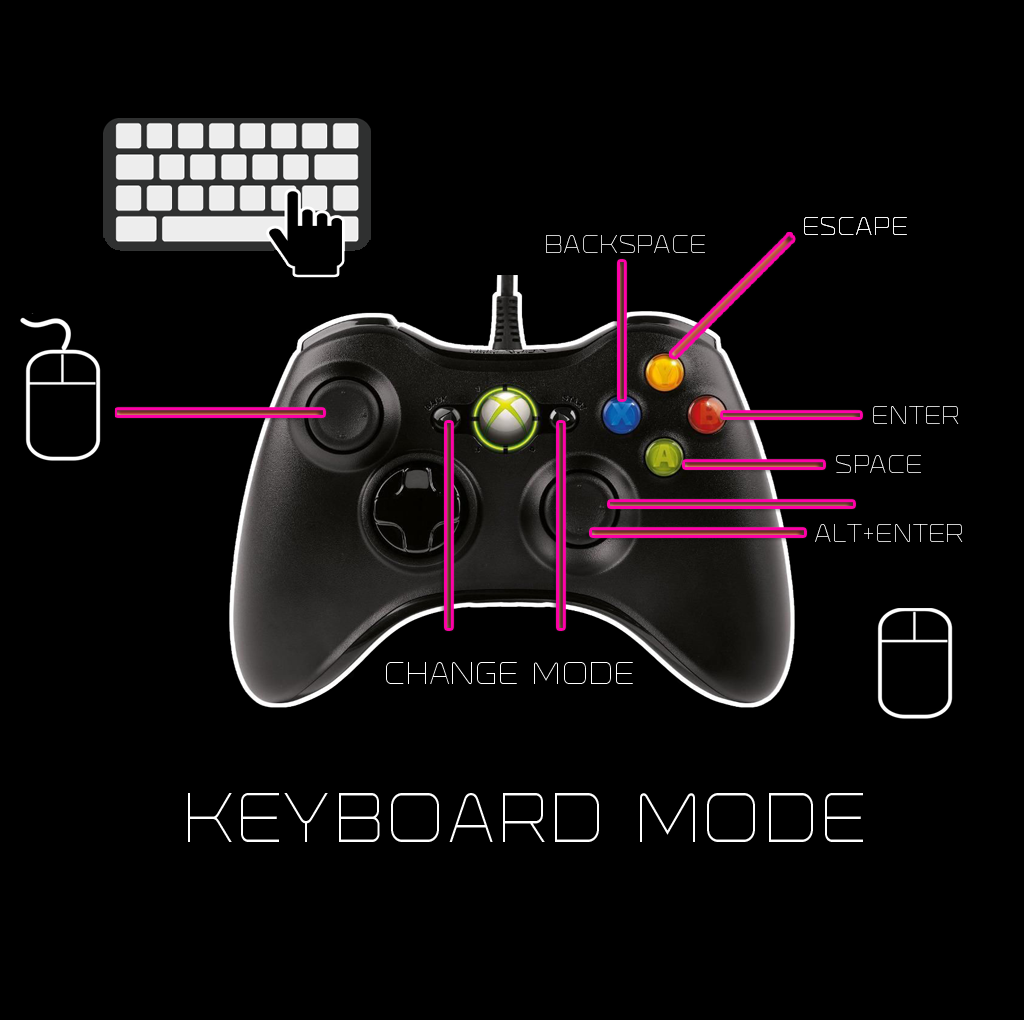
<style>
.page{position:relative;width:1024px;height:1020px;background:#000000}
.page>*{position:absolute;margin:0}
.t1{font:24px "RonduitCapitals-Light";color:#ffffff;scale:0.86 1}
.t2{font:29.4px "RonduitCapitals-Light";color:#ffffff;scale:0.86 1}
</style>
<div class="page">
<p class="t1" style="left:804px;top:217px;width:103px;height:18px">ESCAPE</p>
<p class="t1" style="left:804px;top:217px;width:103px;height:18px">ESCAPE</p>
<p class="t1" style="left:546px;top:235px;width:159px;height:18px">BACKSPACE</p>
<p class="t1" style="left:873px;top:406px;width:86px;height:18px">ENTER</p>
<p class="t1" style="left:836px;top:455px;width:85px;height:18px">SPACE</p>
<p class="t1" style="left:815px;top:524px;width:148px;height:18px">ALT+ENTER</p>
<p class="t2" style="left:386px;top:662px;width:247px;height:23px"><span class="t1">  </span> CHANGE MODE</p>
</div>
